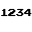
<style>
.page{position:relative;width:32px;height:32px;background:#ffffff}
.page>*{position:absolute;margin:0}
.t1{font:8px "PressStartK";color:#000000}
</style>
<div class="page">
<p class="t1" style="left:1px;top:8px;width:31px;height:9px">1234</p>
</div>
